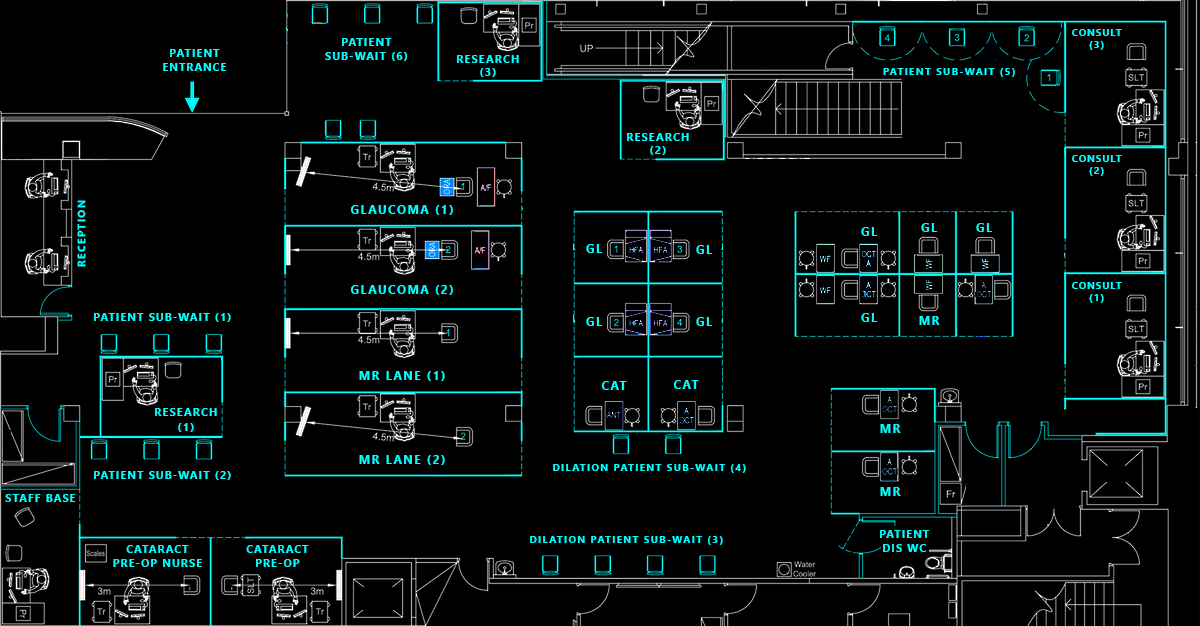
<style>
.page{position:relative;width:1200px;height:626px;background:#000000}
.page>*{position:absolute;margin:0}
.t1{font:9.5px/6.4px "SegoeUI-Bold";letter-spacing:0.12em;color:#00ffff}
.t2{font:10.6px/7.1px "SegoeUI-Bold";letter-spacing:0.12em;color:#00ffff}
.t3{font:10.7px/6.2px "SegoeUI-Bold";letter-spacing:0.12em;color:#00ffff}
.t4{font:10.2px "SegoeUI-Bold";letter-spacing:0.12em;color:#00ffff}
.t5{font:10.6px "SegoeUI-Bold";letter-spacing:0.12em;color:#00ffff}
.t6{font:12px "SegoeUI-Bold";letter-spacing:0.12em;color:#00ffff}
.t7{font:10.7px/7.2px "SegoeUI-Bold";letter-spacing:0.12em;color:#00ffff}
</style>
<div class="page">
<p class="t1" style="left:1072px;top:29px;width:50px;height:21px;text-align:center">CONSULT<br><br>(3)</p>
<p class="t2" style="left:325px;top:38px;width:83px;height:23px;text-align:center">PATIENT <br><br>SUB-WAIT (6)</p>
<p class="t2" style="left:163px;top:49px;width:64px;height:22px;text-align:center">PATIENT<br><br>ENTRANCE</p>
<p class="t3" style="left:457px;top:55px;width:62px;height:22px;text-align:center">RESEARCH<br><br>(3)</p>
<p class="t4" style="left:883px;top:68px;width:132px;height:9px">PATIENT SUB-WAIT (5)</p>
<p class="t3" style="left:627px;top:133px;width:62px;height:22px;text-align:center">RESEARCH<br><br>(2)</p>
<p class="t1" style="left:1072px;top:155px;width:50px;height:21px;text-align:center">CONSULT<br><br>(2)</p>
<p class="t5" style="left:77px;top:200px;width:9px;height:67px;rotate:-90deg">RECEPTION</p>
<p class="t6" style="left:350px;top:205px;width:103px;height:10px">GLAUCOMA (1)</p>
<p class="t6" style="left:861px;top:227px;width:17px;height:9px">GL</p>
<p class="t6" style="left:921px;top:223px;width:17px;height:9px">GL</p>
<p class="t6" style="left:976px;top:223px;width:17px;height:9px">GL</p>
<p class="t6" style="left:586px;top:244px;width:17px;height:9px">GL</p>
<p class="t6" style="left:696px;top:245px;width:17px;height:9px">GL</p>
<p class="t6" style="left:350px;top:285px;width:103px;height:10px">GLAUCOMA (2)</p>
<p class="t1" style="left:1072px;top:282px;width:50px;height:21px;text-align:center">CONSULT<br><br>(1)</p>
<p class="t5" style="left:94px;top:313px;width:137px;height:9px">PATIENT SUB-WAIT (1)</p>
<p class="t6" style="left:586px;top:317px;width:17px;height:9px">GL</p>
<p class="t6" style="left:696px;top:317px;width:17px;height:9px">GL</p>
<p class="t6" style="left:861px;top:313px;width:17px;height:9px">GL</p>
<p class="t6" style="left:919px;top:316px;width:21px;height:9px">MR</p>
<p class="t6" style="left:359px;top:371px;width:86px;height:10px">MR LANE (1)</p>
<p class="t6" style="left:601px;top:381px;width:26px;height:9px">CAT</p>
<p class="t6" style="left:673px;top:380px;width:26px;height:9px">CAT</p>
<p class="t7" style="left:155px;top:408px;width:62px;height:24px;text-align:center">RESEARCH<br><br>(1)</p>
<p class="t6" style="left:880px;top:424px;width:21px;height:9px">MR</p>
<p class="t6" style="left:359px;top:455px;width:86px;height:10px">MR LANE (2)</p>
<p class="t5" style="left:94px;top:471px;width:137px;height:9px">PATIENT SUB-WAIT (2)</p>
<p class="t4" style="left:553px;top:464px;width:193px;height:9px">DILATION PATIENT SUB-WAIT (4)</p>
<p class="t5" style="left:5px;top:494px;width:71px;height:8px">STAFF BASE</p>
<p class="t6" style="left:880px;top:487px;width:21px;height:9px">MR</p>
<p class="t2" style="left:880px;top:530px;width:50px;height:22px;text-align:center">PATIENT<br><br>DIS WC</p>
<p class="t2" style="left:113px;top:545px;width:89px;height:22px;text-align:center">CATARACT <br><br>PRE-OP NURSE</p>
<p class="t2" style="left:246px;top:545px;width:63px;height:22px;text-align:center">CATARACT <br><br>PRE-OP</p>
<p class="t4" style="left:530px;top:536px;width:193px;height:9px">DILATION PATIENT SUB-WAIT (3)</p>
</div>
